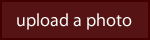
<style>
.page{position:relative;width:150px;height:40px;background:#551413}
.page>*{position:absolute;margin:0}
.t1{font:18px "MyriadPro-Regular";color:#ffffff}
</style>
<div class="page">
<p class="t1" style="left:17px;top:13px;width:115px;height:17px">upload a photo</p>
</div>
